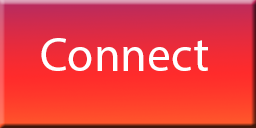
<style>
.page{position:relative;width:256px;height:128px}
.page>*{position:absolute;margin:0}
.t1{font:48px "MyriadPro-Regular";color:#ffffff}
</style>
<div class="page">
<p class="t1" style="left:41px;top:38px;width:167px;height:33px">Connect</p>
</div>
